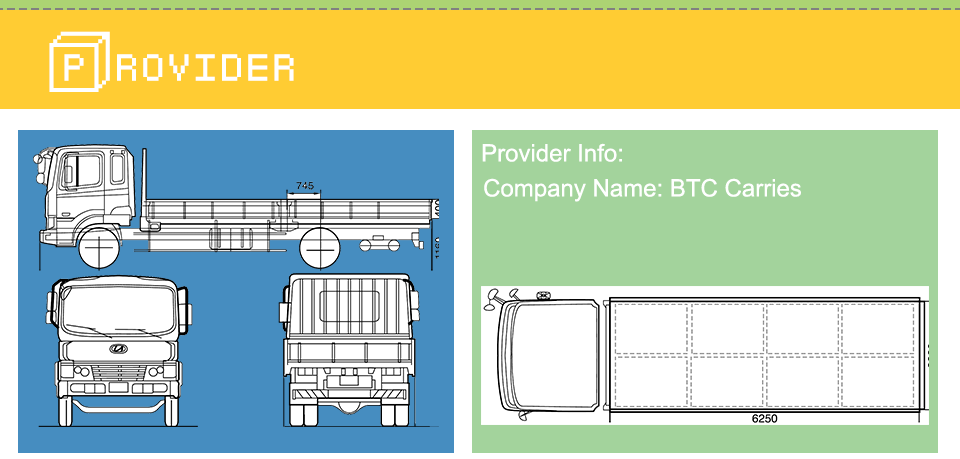
<style>
.page{position:relative;width:960px;height:459px;background:#ffffff}
.page>*{position:absolute;margin:0}
.t1{font:60px "Baby-blocks";color:#ffffff}
.t2{font:24px "ArialMT";color:#ffffff}
</style>
<div class="page">
<p class="t1" style="left:49px;top:31px;width:245px;height:61px">Provider</p>
<p class="t2" style="left:482px;top:143px;width:140px;height:19px">Provider Info:</p>
<p class="t2" style="left:484px;top:178px;width:317px;height:24px">Company Name: BTC Carries</p>
</div>
